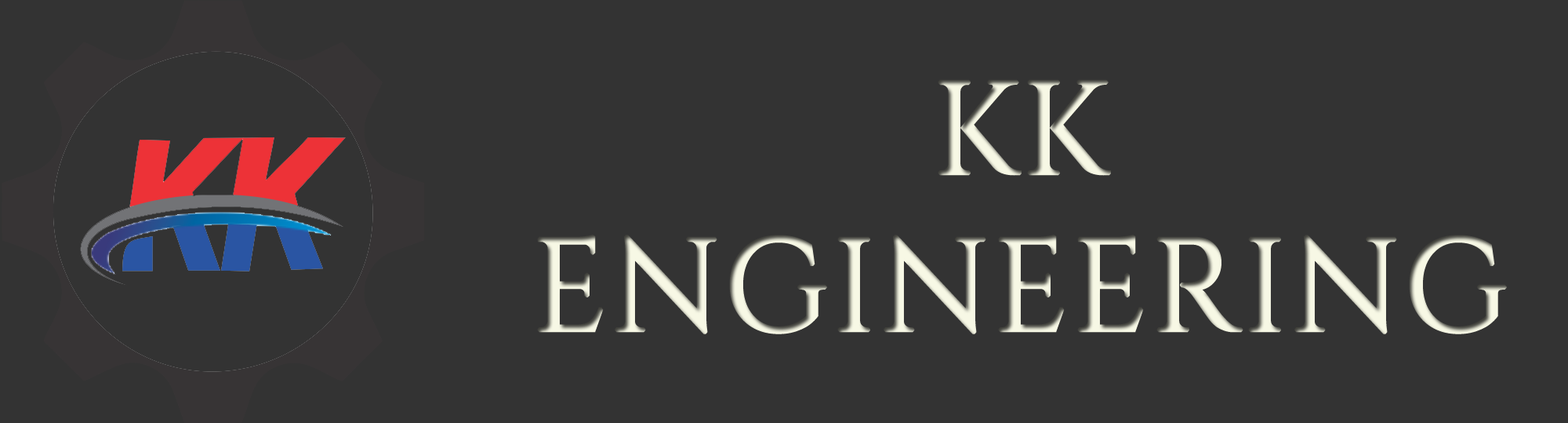
<style>
.page{position:relative;width:1568px;height:423px;background:#333333}
.page>*{position:absolute;margin:0}
.t1{font:130.7px "Cinzel-Regular";font-weight:bold}
</style>
<div class="page">
<p class="t1" style="left:537px;top:79px;width:970px;height:255px;text-align:center">KK<br>ENGINEERING</p>
</div>
